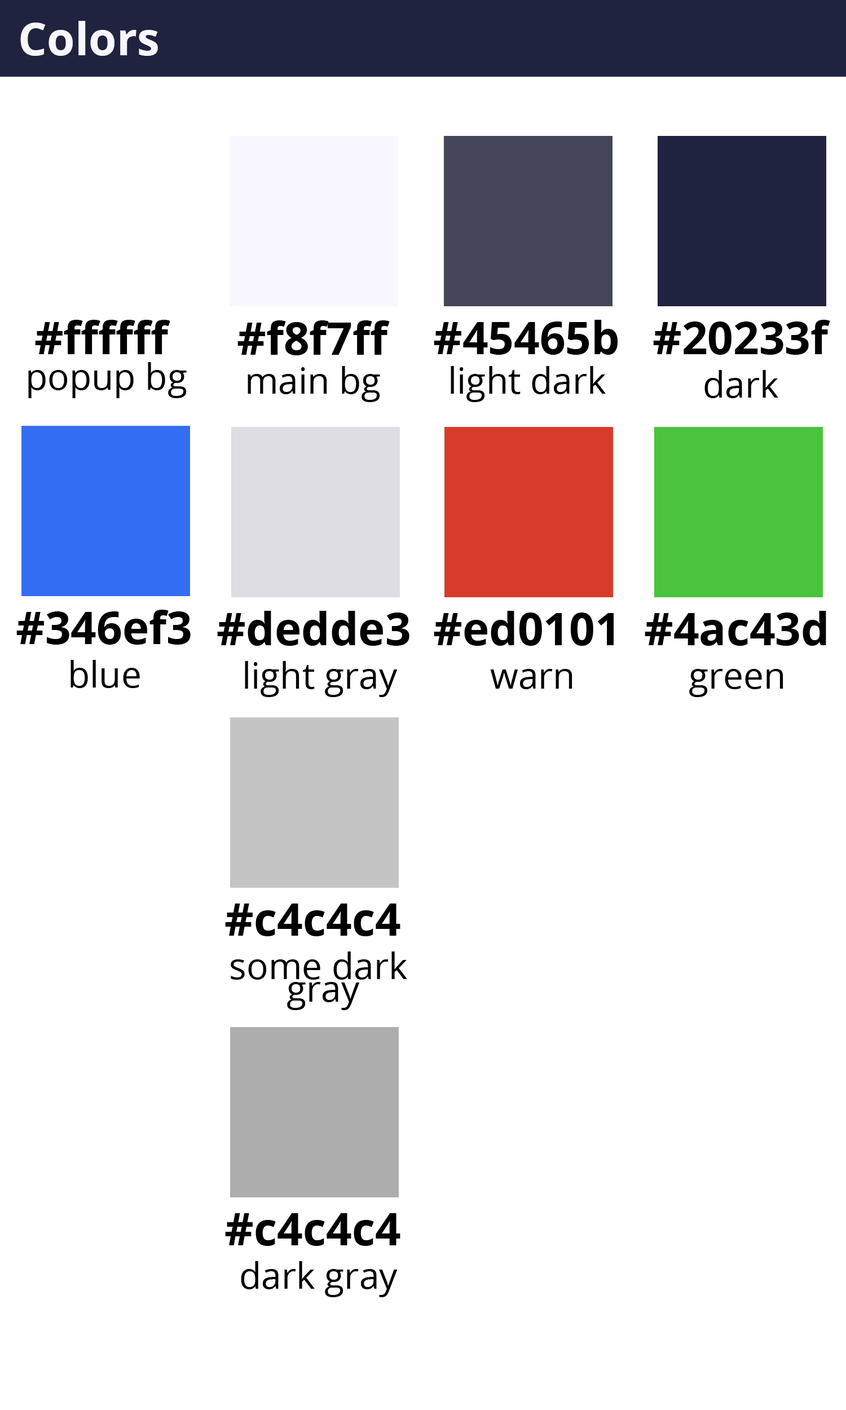
<style>
.page{position:relative;width:846px;height:1410px;background:#ffffff}
.page>*{position:absolute;margin:0}
.t1{font:45.1px "OpenSans-Bold";color:#f8f6ff}
.t2{font:45.1px "OpenSans-Bold";color:#000000}
.t3{font:36.1px "OpenSans";color:#000000}
.t4{font:36.1px/22.6px "OpenSans";color:#000000}
</style>
<div class="page">
<p class="t1" style="left:20px;top:21px;width:138px;height:35px">Colors</p>
<p class="t2" style="left:35px;top:320px;width:135px;height:34px">#ffffff</p>
<p class="t2" style="left:237px;top:320px;width:153px;height:35px">#f8f7ff</p>
<p class="t2" style="left:434px;top:320px;width:183px;height:35px">#45465b</p>
<p class="t2" style="left:653px;top:320px;width:177px;height:35px">#20233f</p>
<p class="t3" style="left:28px;top:362px;width:159px;height:36px">popup bg</p>
<p class="t3" style="left:248px;top:366px;width:132px;height:36px">main bg</p>
<p class="t3" style="left:451px;top:366px;width:155px;height:36px">light dark</p>
<p class="t3" style="left:704px;top:370px;width:74px;height:28px">dark</p>
<p class="t2" style="left:16px;top:610px;width:175px;height:35px">#346ef3</p>
<p class="t2" style="left:217px;top:611px;width:192px;height:35px">#dedde3</p>
<p class="t2" style="left:434px;top:611px;width:180px;height:35px">#ed0101</p>
<p class="t2" style="left:645px;top:611px;width:181px;height:35px">#4ac43d</p>
<p class="t3" style="left:70px;top:660px;width:70px;height:28px">blue</p>
<p class="t3" style="left:245px;top:661px;width:153px;height:36px">light gray</p>
<p class="t3" style="left:490px;top:669px;width:82px;height:20px">warn</p>
<p class="t3" style="left:689px;top:669px;width:94px;height:28px">green</p>
<p class="t2" style="left:225px;top:903px;width:175px;height:33px">#c4c4c4</p>
<p class="t4" style="left:231px;top:951px;width:176px;height:59px;text-align:center">some dark<br> gray</p>
<p class="t2" style="left:225px;top:1213px;width:175px;height:33px">#c4c4c4</p>
<p class="t3" style="left:241px;top:1261px;width:157px;height:36px">dark gray</p>
</div>
